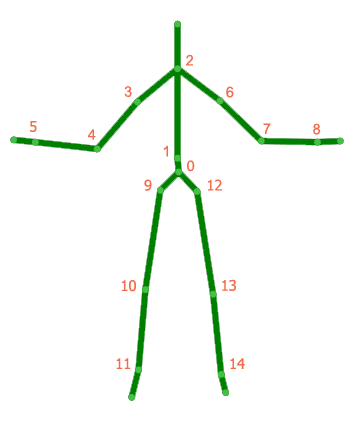
<style>
.page{position:relative;width:359px;height:429px;background:#ffffff}
.page>*{position:absolute;margin:0}
.t1{font:14.7px "ArialMT";color:#f26c4f}
.t2{font:14.7px "Tahoma";color:#f26c4f}
</style>
<div class="page">
<p class="t1" style="left:186px;top:54px;width:7px;height:12px">2</p>
<p class="t1" style="left:124px;top:86px;width:8px;height:11px">3</p>
<p class="t1" style="left:226px;top:86px;width:8px;height:12px">6</p>
<p class="t2" style="left:30px;top:121px;width:7px;height:11px">5</p>
<p class="t1" style="left:263px;top:123px;width:8px;height:11px">7</p>
<p class="t1" style="left:313px;top:123px;width:8px;height:12px">8</p>
<p class="t1" style="left:88px;top:129px;width:8px;height:11px">4</p>
<p class="t1" style="left:163px;top:145px;width:5px;height:12px">1</p>
<p class="t1" style="left:187px;top:160px;width:8px;height:12px">0</p>
<p class="t2" style="left:144px;top:179px;width:8px;height:12px">9</p>
<p class="t2" style="left:208px;top:179px;width:14px;height:12px">12</p>
<p class="t2" style="left:122px;top:280px;width:14px;height:12px">10</p>
<p class="t2" style="left:222px;top:279px;width:14px;height:12px">13</p>
<p class="t2" style="left:116px;top:358px;width:15px;height:11px">11</p>
<p class="t2" style="left:230px;top:358px;width:15px;height:11px">14</p>
</div>
